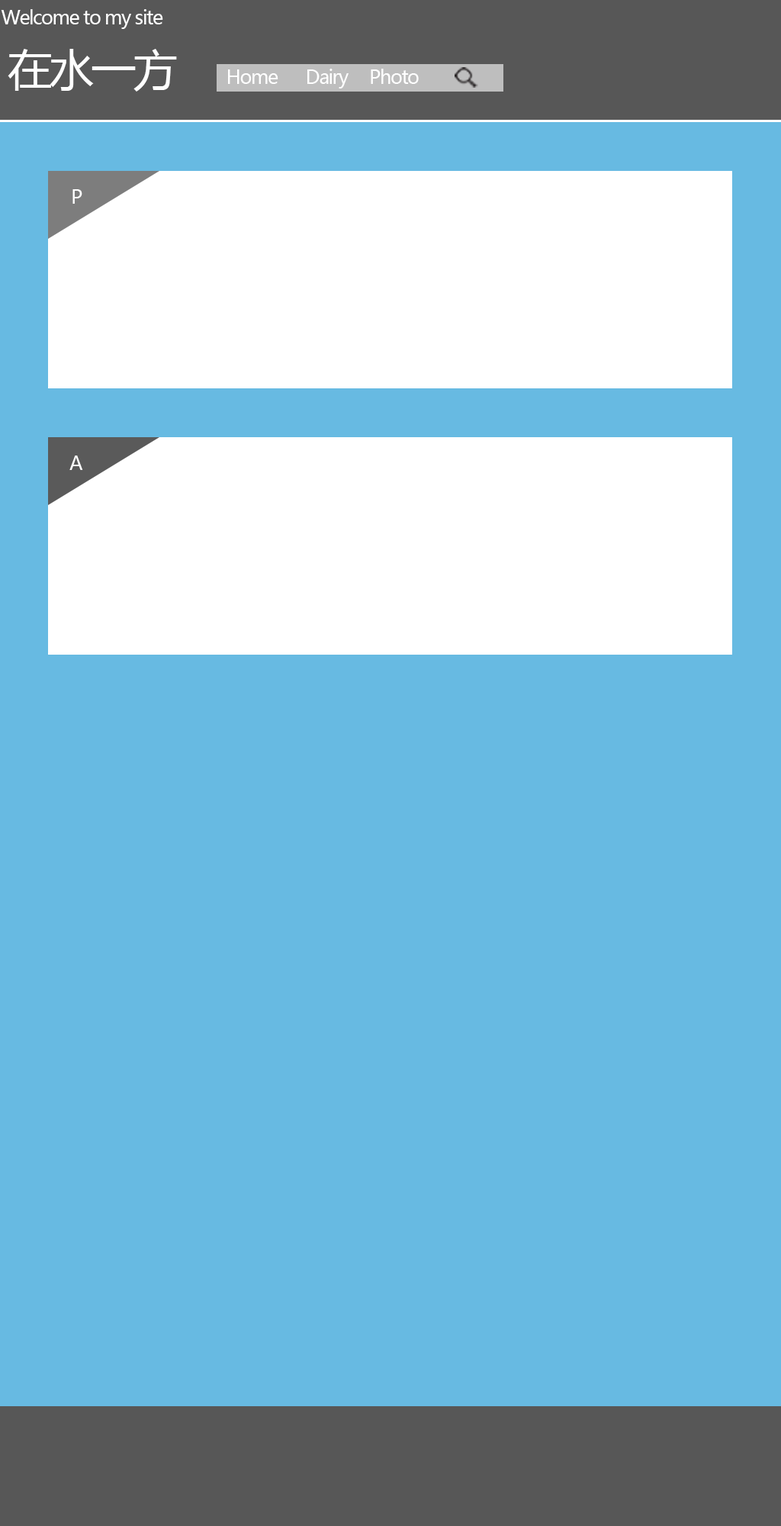
<style>
.page{position:relative;width:781px;height:1526px;background:#67bae2}
.page>*{position:absolute;margin:0}
.t1{font:19.1px "MicrosoftYaHei";letter-spacing:-0.06em;color:#ffffff}
.t2{font:44.5px "MicrosoftYaHei";letter-spacing:-0.06em;color:#ffffff}
</style>
<div class="page">
<p class="t1" style="left:1px;top:9px;width:162px;height:20px">Welcome to my site</p>
<p class="t2" style="left:8px;top:49px;width:169px;height:43px">在水一方</p>
<p class="t1" style="left:228px;top:69px;width:51px;height:15px">Home</p>
<p class="t1" style="left:308px;top:69px;width:41px;height:20px">Dairy</p>
<p class="t1" style="left:371px;top:69px;width:48px;height:15px">Photo</p>
<p class="t1" style="left:72px;top:189px;width:10px;height:15px">P</p>
<p class="t1" style="left:69px;top:456px;width:14px;height:14px">A</p>
</div>
